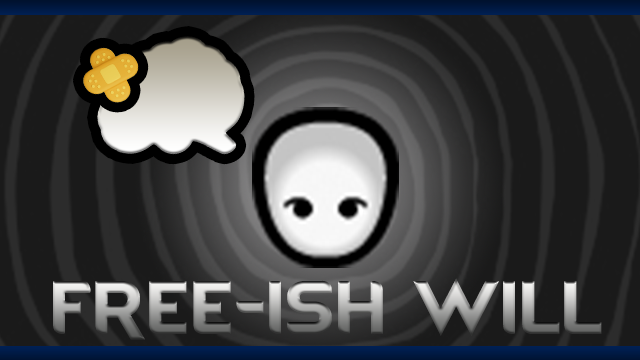
<style>
.page{position:relative;width:640px;height:360px;background:#1a1a1a}
.page>*{position:absolute;margin:0}
.t1{font:64px "RimWordFont";text-transform:uppercase}
</style>
<div class="page">
<p class="t1" style="left:53px;top:278px;width:549px;height:62px">Free-ish Will</p>
</div>
